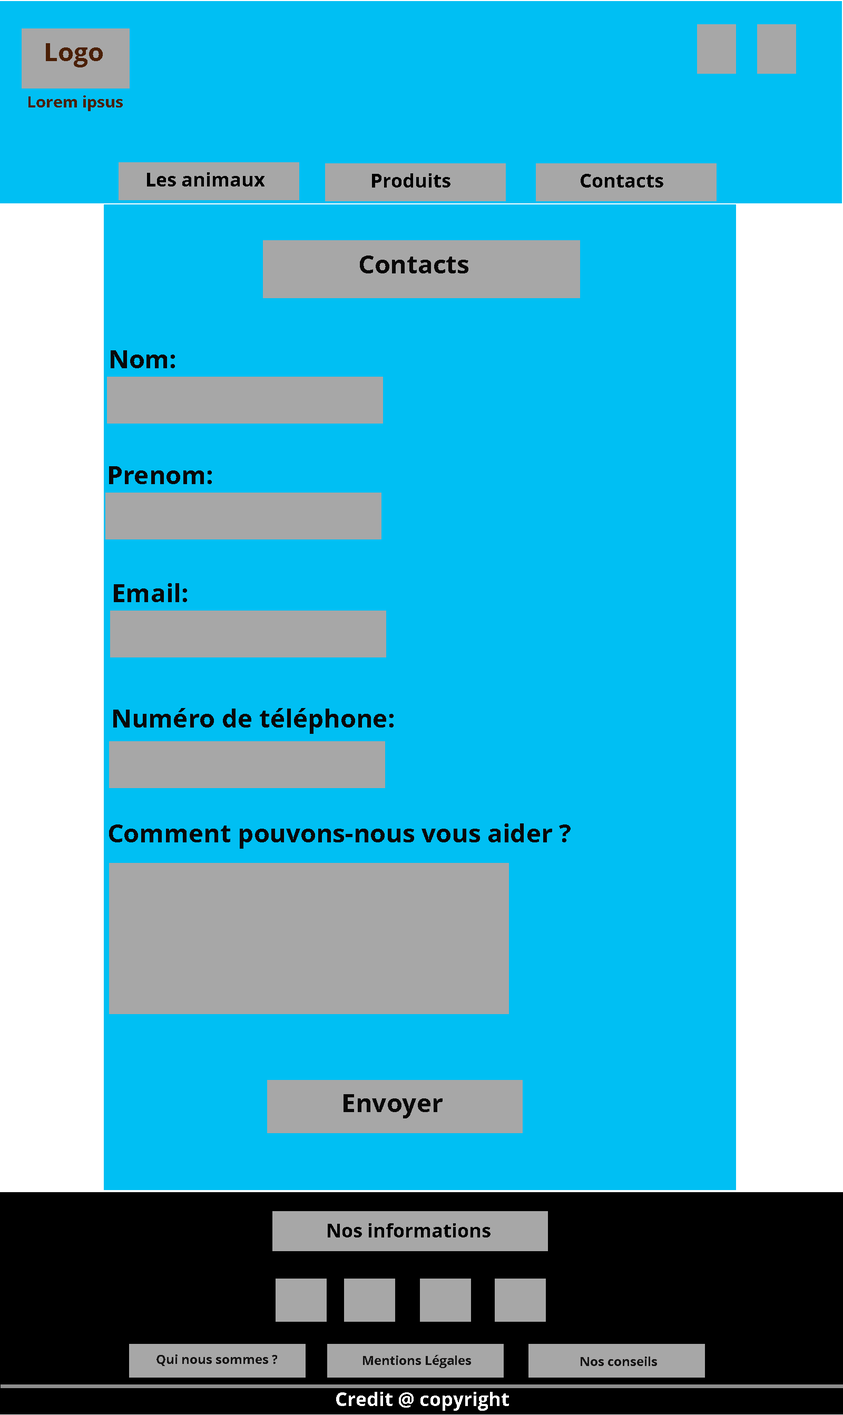
<style>
.page{position:relative;width:843px;height:1415px;background:#00bff3}
.page>*{position:absolute;margin:0}
.t1{font:25.3px "OpenSans-Bold";color:#4b2007}
.t2{font:15.8px "OpenSans-Bold";color:#4b2007}
.t3{font:19px "OpenSans-Bold";color:#000000}
.t4{font:25.3px "OpenSans-Bold";color:#090808}
.t5{font:12.6px "OpenSans-Bold";color:#171616}
.t6{font:19px "OpenSans-Bold";color:#ffffff}
</style>
<div class="page">
<p class="t1" style="left:46px;top:43px;width:57px;height:24px">Logo</p>
<p class="t2" style="left:28px;top:95px;width:95px;height:16px">Lorem ipsus</p>
<p class="t3" style="left:147px;top:172px;width:117px;height:14px">Les animaux</p>
<p class="t3" style="left:372px;top:173px;width:78px;height:15px">Produits</p>
<p class="t3" style="left:580px;top:174px;width:83px;height:14px">Contacts</p>
<p class="t4" style="left:360px;top:255px;width:108px;height:18px">Contacts</p>
<p class="t4" style="left:111px;top:350px;width:64px;height:18px">Nom:</p>
<p class="t4" style="left:109px;top:466px;width:103px;height:18px">Prenom:</p>
<p class="t4" style="left:114px;top:583px;width:73px;height:19px">Email:</p>
<p class="t4" style="left:113px;top:708px;width:280px;height:26px">Numéro de téléphone:</p>
<p class="t4" style="left:109px;top:823px;width:461px;height:26px">Comment pouvons-nous vous aider ?</p>
<p class="t4" style="left:343px;top:1094px;width:99px;height:24px">Envoyer</p>
<p class="t3" style="left:328px;top:1223px;width:162px;height:14px">Nos informations</p>
<p class="t5" style="left:156px;top:1354px;width:121px;height:12px">Qui nous sommes ?</p>
<p class="t5" style="left:363px;top:1355px;width:108px;height:13px">Mentions Légales</p>
<p class="t5" style="left:580px;top:1356px;width:77px;height:10px">Nos conseils</p>
<p class="t6" style="left:336px;top:1392px;width:173px;height:19px">Credit @ copyright</p>
</div>
